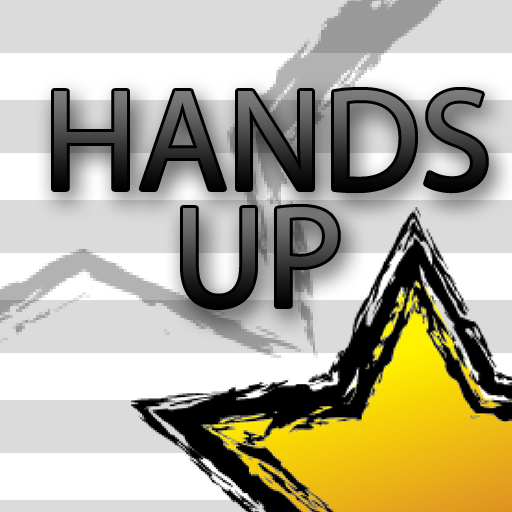
<style>
.page{position:relative;width:512px;height:512px;background:#dbdbdb}
.page>*{position:absolute;margin:0}
.t1{font:145.8px "MyriadPro-Regular"}
</style>
<div class="page">
<p class="t1" style="left:54px;top:90px;width:432px;height:101px">HANDS</p>
<p class="t1" style="left:183px;top:207px;width:155px;height:100px">UP</p>
</div>
